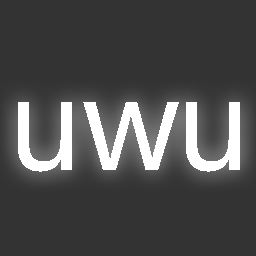
<style>
.page{position:relative;width:256px;height:256px;background:#333333}
.page>*{position:absolute;margin:0}
.t1{font:133.3px "AcuminConcept-Regular";color:#ffffff}
</style>
<div class="page">
<p class="t1" style="left:18px;top:102px;width:222px;height:70px">uwu</p>
</div>
